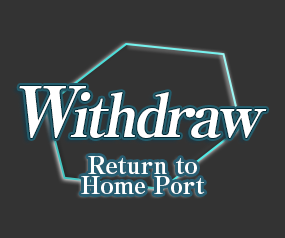
<style>
.page{position:relative;width:285px;height:238px;background:#333333}
.page>*{position:absolute;margin:0}
.t1{font:60px "RyuminPro-ExBold";letter-spacing:-0.06em;color:#ffffff;font-style:italic}
.t2{font:70px "RyuminPro-ExBold";letter-spacing:-0.06em;color:#ffffff;font-style:italic}
.t3{font:24px/20px "RyuminPro-ExBold";color:#ffffff}
</style>
<div class="page">
<p class="t1" style="left:19px;top:86px;width:248px;height:52px"><span class="t2">W</span>ithdraw</p>
<p class="t3" style="left:81px;top:156px;width:124px;height:38px;text-align:center">Return to<br>Home Port</p>
</div>
